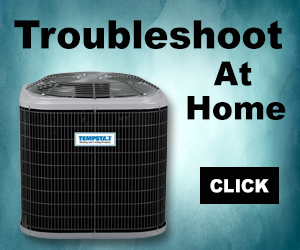
<style>
.page{position:relative;width:300px;height:250px}
.page>*{position:absolute;margin:0}
.t1{font:39.4px "Arial-Black";color:#020202;scale:0.95 1}
.t2{font:33.2px "Arial-Black";color:#020202;scale:0.95 1}
.t3{font:33px "Arial-Black";color:#020202;scale:0.97 1}
.t4{font:18px "Arial-Black";color:#ffffff;scale:0.95 1}
</style>
<div class="page">
<p class="t1" style="left:14px;top:20px;width:269px;height:29px">Troubleshoot</p>
<p class="t2" style="left:213px;top:61px;width:39px;height:25px">At</p>
<p class="t3" style="left:187px;top:96px;width:99px;height:24px">Home</p>
<p class="t4" style="left:210px;top:179px;width:59px;height:14px">CLICK</p>
</div>
